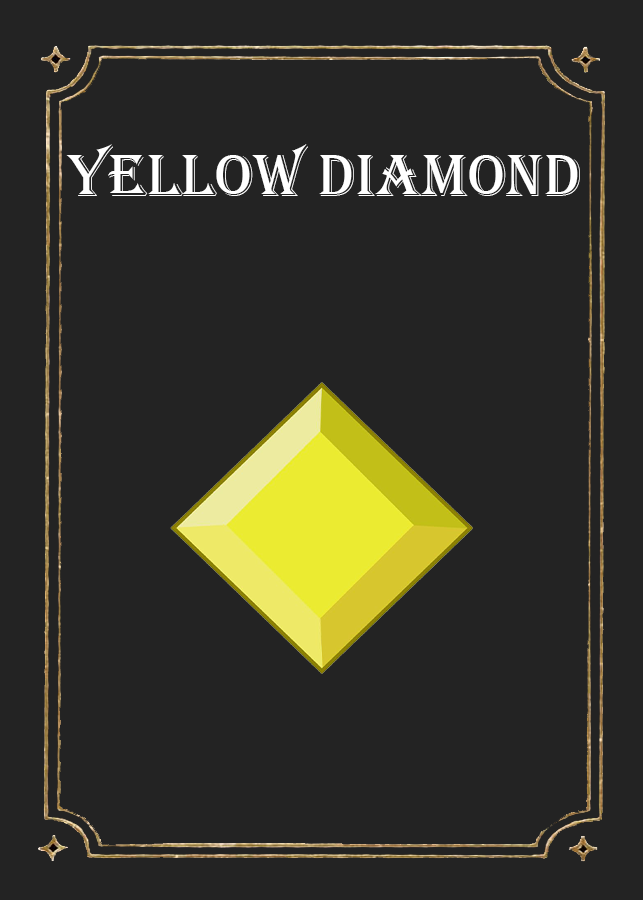
<style>
.page{position:relative;width:643px;height:900px;background:#232323}
.page>*{position:absolute;margin:0}
.t1{font:62.3px "Algerian";color:#ffffff}
</style>
<div class="page">
<p class="t1" style="left:66px;top:144px;width:514px;height:52px">Yellow diamond</p>
</div>
